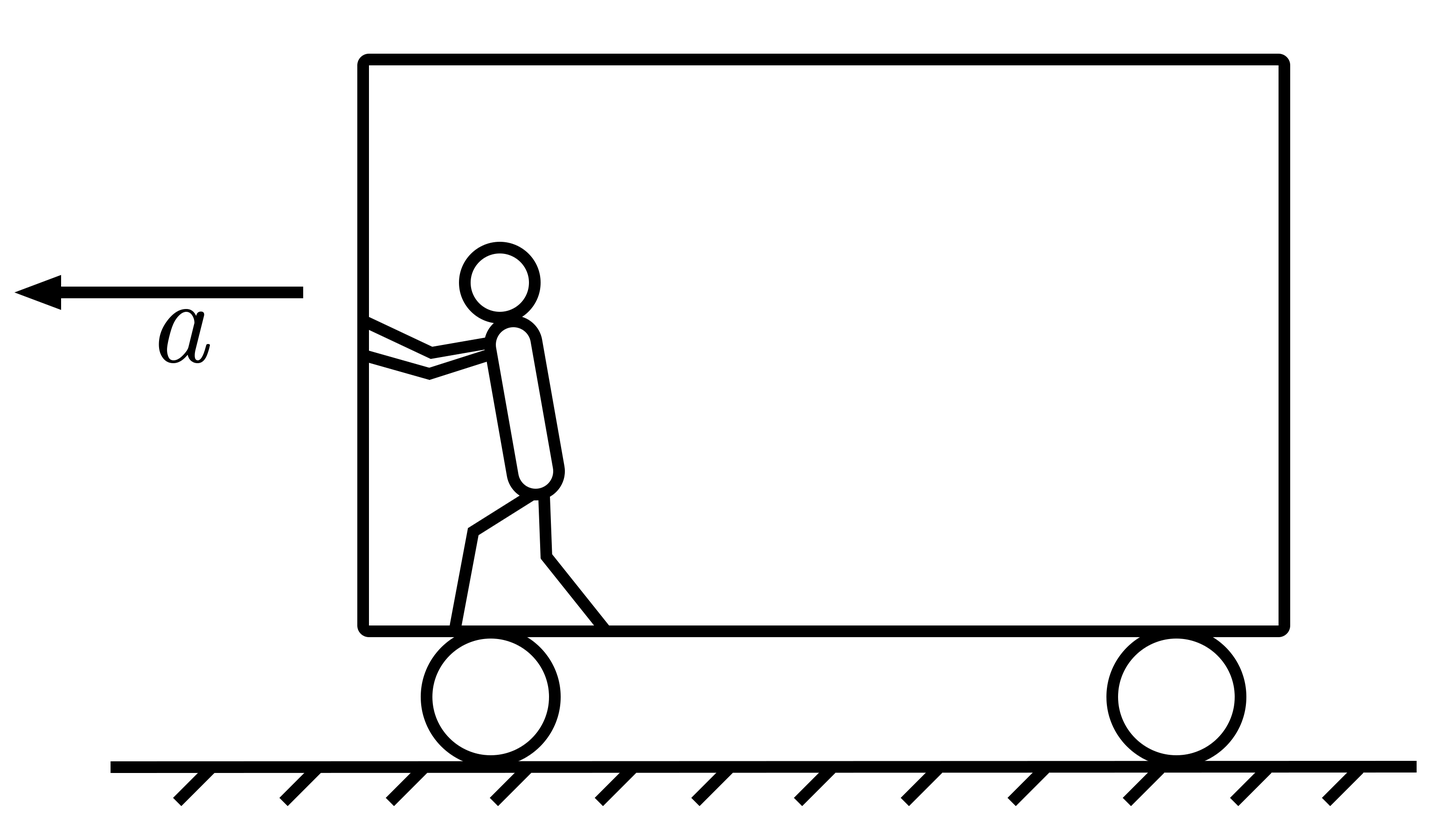
<style>
.page{position:relative;width:1439px;height:829px;background:#ffffff}
.page>*{position:absolute;margin:0}
.t1{font:119.4px "CMUSerif-Italic";color:#000000}
</style>
<div class="page">
<p class="t1" style="left:159px;top:309px;width:51px;height:54px">a</p>
</div>
